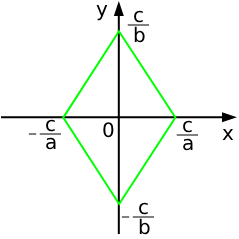
<style>
.page{position:relative;width:239px;height:239px;background:#ffffff}
.page>*{position:absolute;margin:0}
.t1{font:20px "DejaVuSans";color:#000000}
</style>
<div class="page">
<p class="t1" style="left:96px;top:5px;width:12px;height:16px">y</p>
<p class="t1" style="left:134px;top:10px;width:9px;height:13px">c</p>
<p class="t1" style="left:134px;top:26px;width:11px;height:17px">b</p>
<p class="t1" style="left:46px;top:119px;width:9px;height:13px">c</p>
<p class="t1" style="left:103px;top:122px;width:11px;height:16px">0</p>
<p class="t1" style="left:183px;top:120px;width:9px;height:13px">c</p>
<p class="t1" style="left:46px;top:137px;width:10px;height:13px">a</p>
<p class="t1" style="left:222px;top:129px;width:12px;height:11px">x</p>
<p class="t1" style="left:183px;top:138px;width:10px;height:13px">a</p>
<p class="t1" style="left:139px;top:202px;width:9px;height:13px">c</p>
<p class="t1" style="left:139px;top:218px;width:11px;height:17px">b</p>
</div>
